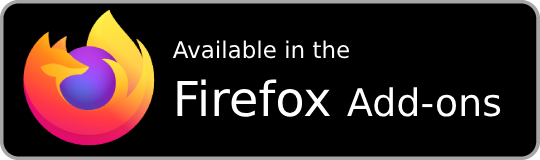
<style>
.page{position:relative;width:540px;height:160px;background:#000000}
.page>*{position:absolute;margin:0}
.t1{font:23px "DejaVuSans";color:#ffffff}
.t2{font:48px "DejaVuSans";color:#ffffff}
.t3{font:38px "DejaVuSans";color:#ffffff}
</style>
<div class="page">
<p class="t1" style="left:172px;top:40px;width:329px;height:77px">Available in the <br><span class="t2">Firefox </span><span class="t3">Add-ons</span></p>
</div>
